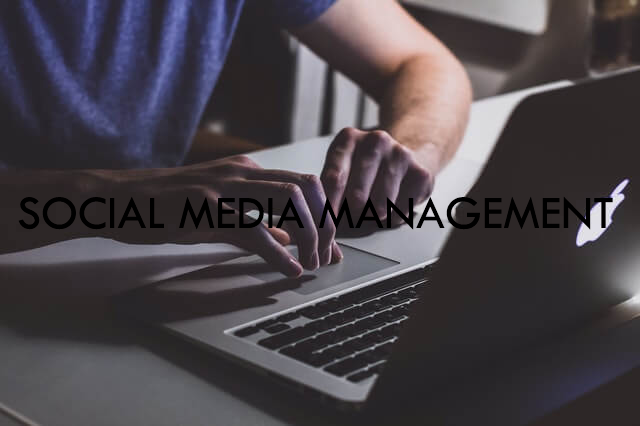
<style>
.page{position:relative;width:640px;height:426px}
.page>*{position:absolute;margin:0}
.t1{font:48px "TwCenMT-Regular";color:#000000}
</style>
<div class="page">
<p class="t1" style="left:18px;top:196px;width:595px;height:34px">SOCIAL MEDIA MANAGEMENT</p>
</div>
